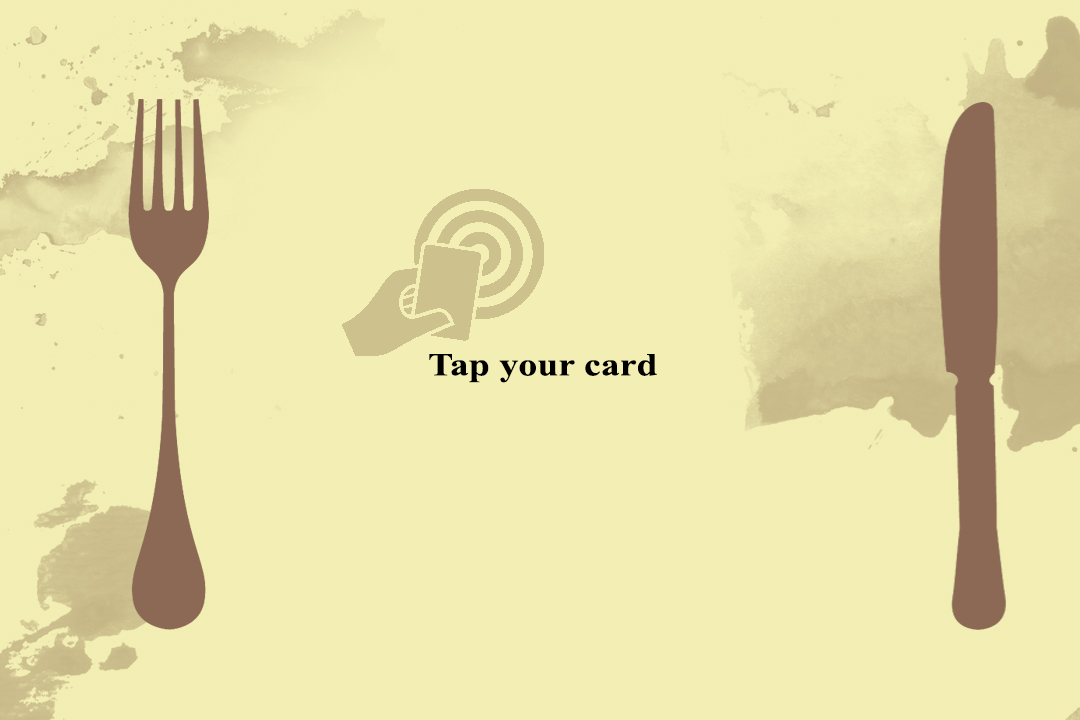
<style>
.page{position:relative;width:1080px;height:720px;background:#f3eeb4}
.page>*{position:absolute;margin:0}
.t1{font:32.1px "TimesNewRomanPS-BoldMT";color:#000000;scale:1.18 1}
</style>
<div class="page">
<p class="t1" style="left:429px;top:354px;width:228px;height:29px">Tap your card</p>
</div>
